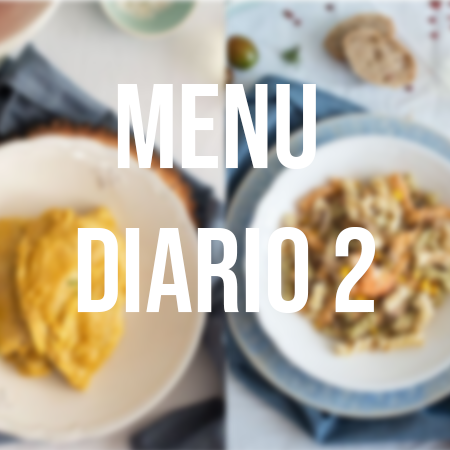
<style>
.page{position:relative;width:450px;height:450px}
.page>*{position:absolute;margin:0}
.t1{font:120px "BebasNeue-Regular";color:#ffffff}
</style>
<div class="page">
<p class="t1" style="left:77px;top:84px;width:299px;height:229px;text-align:center">MENU <br>DIARIO 2</p>
</div>
